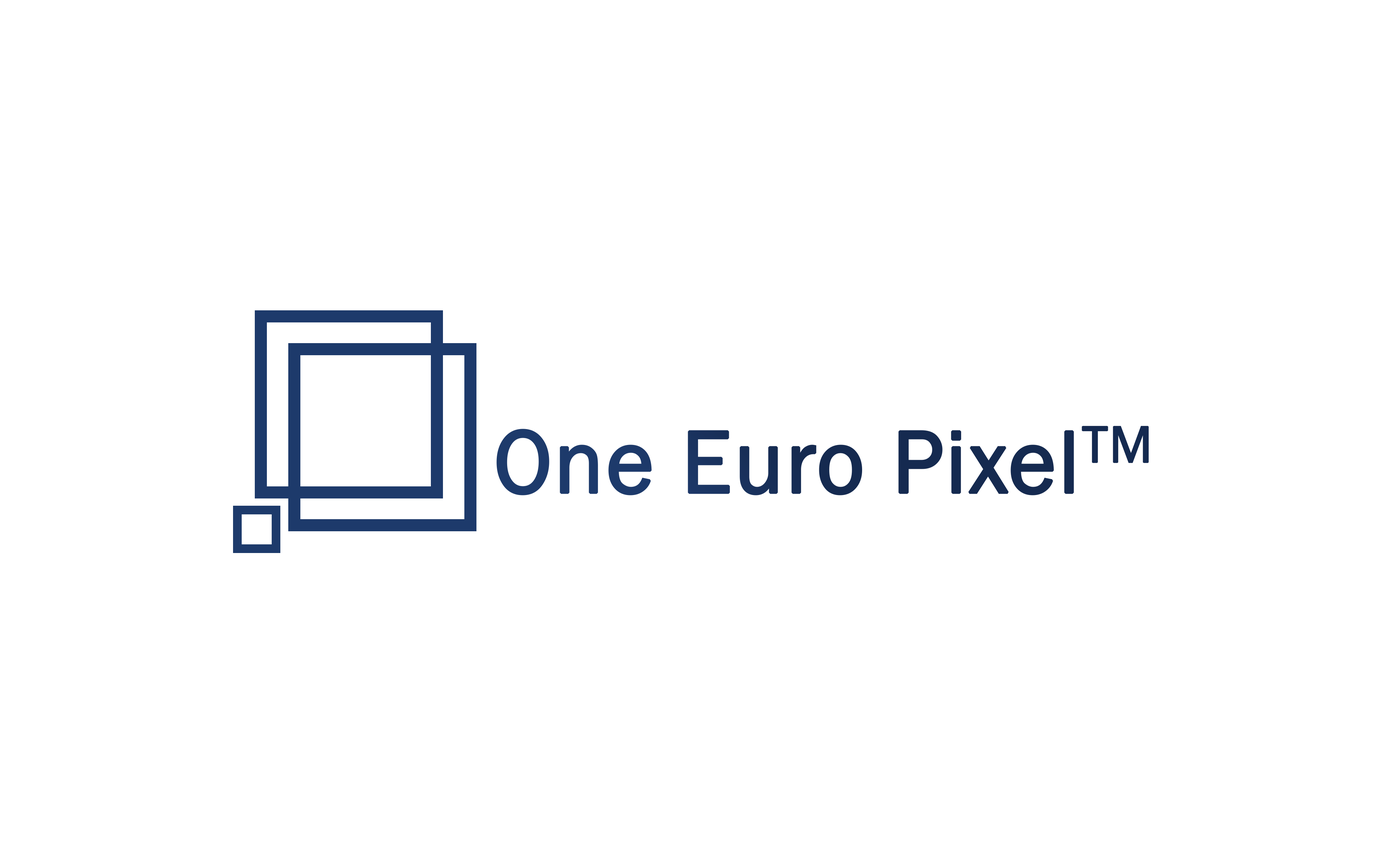
<style>
.page{position:relative;width:1381px;height:863px;background:#ffffff}
.page>*{position:absolute;margin:0}
.t1{font:91.4px "FranklinGothic-Book";font-weight:bold}
</style>
<div class="page">
<p class="t1" style="left:497px;top:426px;width:652px;height:70px">One Euro PixelTM</p>
</div>
